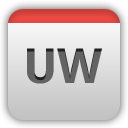
<style>
.page{position:relative;width:128px;height:128px}
.page>*{position:absolute;margin:0}
.t1{font:48px "DroidSans-Bold";color:#636363}
</style>
<div class="page">
<p class="t1" style="left:27px;top:48px;width:75px;height:36px">UW</p>
</div>
